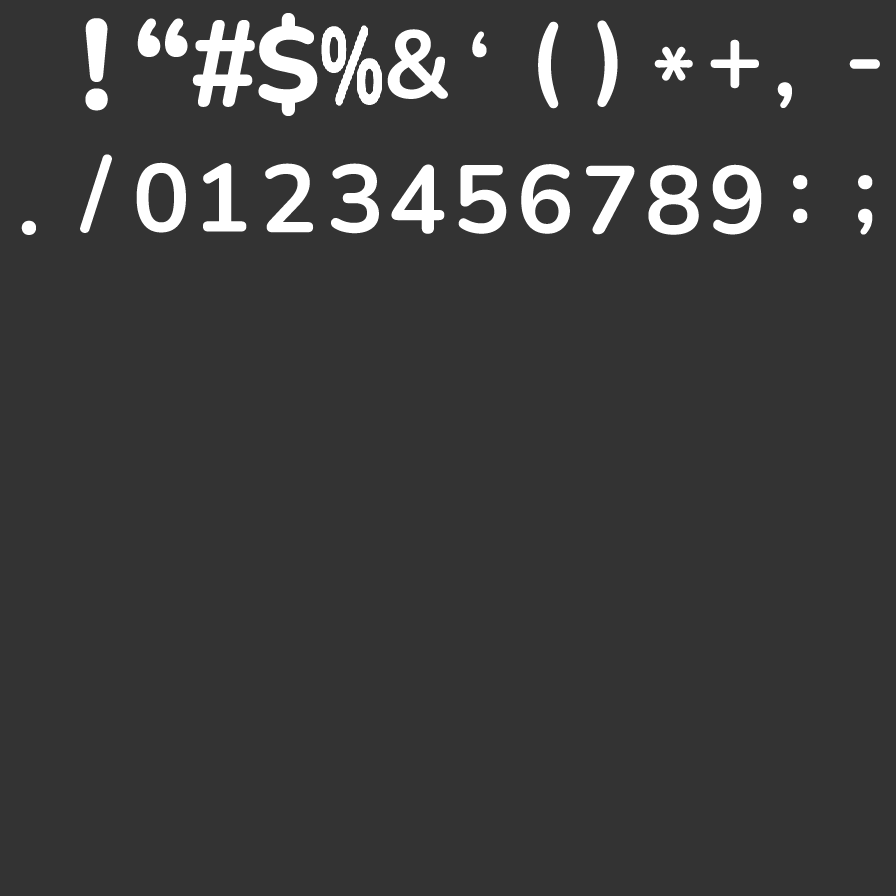
<style>
.page{position:relative;width:896px;height:896px;background:#333333}
.page>*{position:absolute;margin:0}
.t1{font:108px "Nunito-ExtraBold";color:#ffffff}
.t2{font:128px "Nunito-ExtraBold";color:#ffffff}
.t3{font:120px "Nunito-ExtraBold";color:#ffffff}
.t4{font:96px "Nunito-Bold";color:#ffffff}
</style>
<div class="page">
<p class="t1" style="left:258px;top:13px;width:60px;height:103px">$</p>
<p class="t2" style="left:85px;top:18px;width:23px;height:93px">!</p>
<p class="t2" style="left:137px;top:18px;width:51px;height:39px">“</p>
<p class="t3" style="left:192px;top:20px;width:63px;height:87px">#</p>
<p class="t4" style="left:387px;top:29px;width:61px;height:70px">&amp;</p>
<p class="t4" style="left:538px;top:21px;width:21px;height:88px">(</p>
<p class="t4" style="left:597px;top:20px;width:21px;height:87px">)</p>
<p class="t4" style="left:472px;top:31px;width:15px;height:27px">‘</p>
<p class="t4" style="left:710px;top:39px;width:49px;height:50px">+</p>
<p class="t4" style="left:654px;top:46px;width:39px;height:35px">*</p>
<p class="t4" style="left:849px;top:59px;width:31px;height:10px">-</p>
<p class="t4" style="left:777px;top:82px;width:15px;height:26px">,</p>
<p class="t4" style="left:80px;top:154px;width:32px;height:79px">/</p>
<p class="t4" style="left:136px;top:162px;width:50px;height:71px">0</p>
<p class="t4" style="left:203px;top:163px;width:44px;height:69px">1</p>
<p class="t4" style="left:265px;top:163px;width:49px;height:70px">2</p>
<p class="t4" style="left:331px;top:163px;width:48px;height:71px">3</p>
<p class="t4" style="left:391px;top:164px;width:54px;height:70px">4</p>
<p class="t4" style="left:458px;top:165px;width:49px;height:69px">5</p>
<p class="t4" style="left:521px;top:164px;width:49px;height:70px">6</p>
<p class="t4" style="left:586px;top:165px;width:49px;height:70px">7</p>
<p class="t4" style="left:648px;top:165px;width:51px;height:70px">8</p>
<p class="t4" style="left:712px;top:164px;width:50px;height:71px">9</p>
<p class="t4" style="left:793px;top:175px;width:15px;height:48px">:</p>
<p class="t4" style="left:858px;top:175px;width:15px;height:60px">;</p>
<p class="t4" style="left:21px;top:220px;width:15px;height:15px">.</p>
</div>
